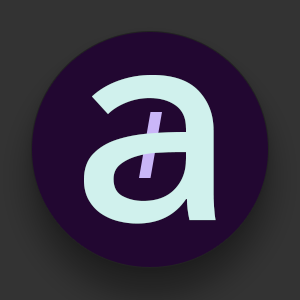
<style>
.page{position:relative;width:300px;height:300px;background:#220731}
.page>*{position:absolute;margin:0}
.t1{font:500px "AvenirNext-Regular";color:#d0f1ed}
</style>
<div class="page">
<p class="t1" style="left:84px;top:75px;width:132px;height:149px">A</p>
</div>
